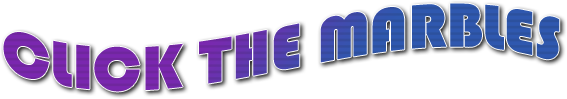
<style>
.page{position:relative;width:567px;height:99px;background:#ffffff}
.page>*{position:absolute;margin:0}
.t1{font:64px "Bauhaus93"}
</style>
<div class="page">
<p class="t1" style="left:3px;top:3px;width:557px;height:89px">CLICK THE MARBLES</p>
</div>
